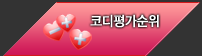
<style>
.page{position:relative;width:202px;height:56px;background:#333333}
.page>*{position:absolute;margin:0}
.t1{font:13.8px "YDIYGO330";letter-spacing:-0.025em;color:#ffffff;font-weight:bold;scale:0.91 1}
</style>
<div class="page">
<p class="t1" style="left:90px;top:14px;width:69px;height:14px">코디평가순위</p>
</div>
